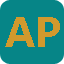
<style>
.page{position:relative;width:64px;height:64px;background:#068587}
.page>*{position:absolute;margin:0}
.t1{font:42px "Gadugi-Bold";color:#d1992d}
</style>
<div class="page">
<p class="t1" style="left:5px;top:17px;width:55px;height:30px">AP</p>
</div>
